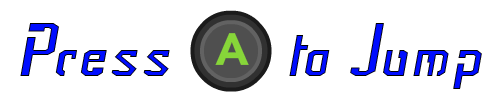
<style>
.page{position:relative;width:500px;height:100px;background:#ffffff}
.page>*{position:absolute;margin:0}
.t1{font:72px "Frak-Regular";color:#000dff}
</style>
<div class="page">
<p class="t1" style="left:20px;top:23px;width:150px;height:53px">Press</p>
<p class="t1" style="left:289px;top:23px;width:193px;height:66px">to Jump</p>
</div>
